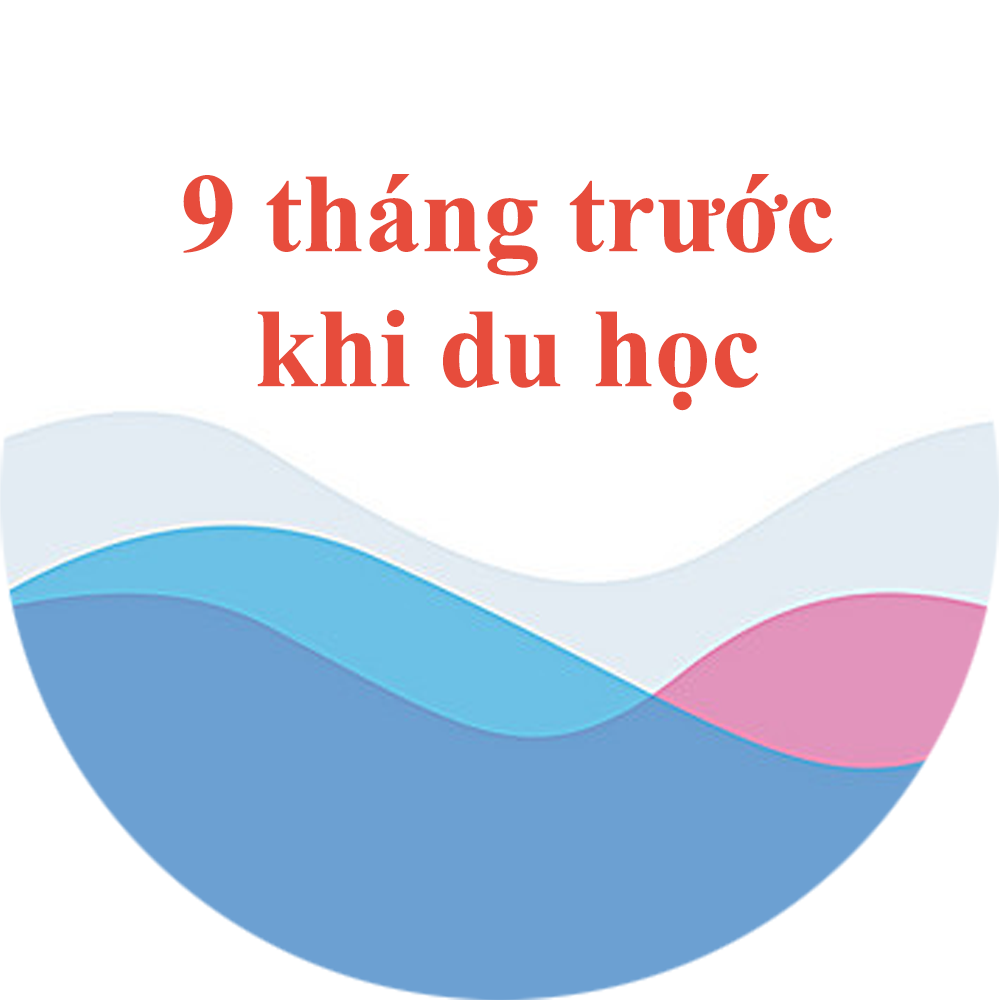
<style>
.page{position:relative;width:1000px;height:1000px;background:#ffffff}
.page>*{position:absolute;margin:0}
.t1{font:112.5px "TimesNewRomanPS-BoldMT";color:#e74c3c}
</style>
<div class="page">
<p class="t1" style="left:183px;top:174px;width:650px;height:237px;text-align:center">9 tháng trước khi du học</p>
</div>
